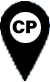
<style>
.page{position:relative;width:50px;height:82px;background:#ffffff}
.page>*{position:absolute;margin:0}
.t1{font:18px "AcuminConcept-Black";color:#000000;text-transform:uppercase}
</style>
<div class="page">
<p class="t1" style="left:12px;top:20px;width:25px;height:14px">cP</p>
</div>
